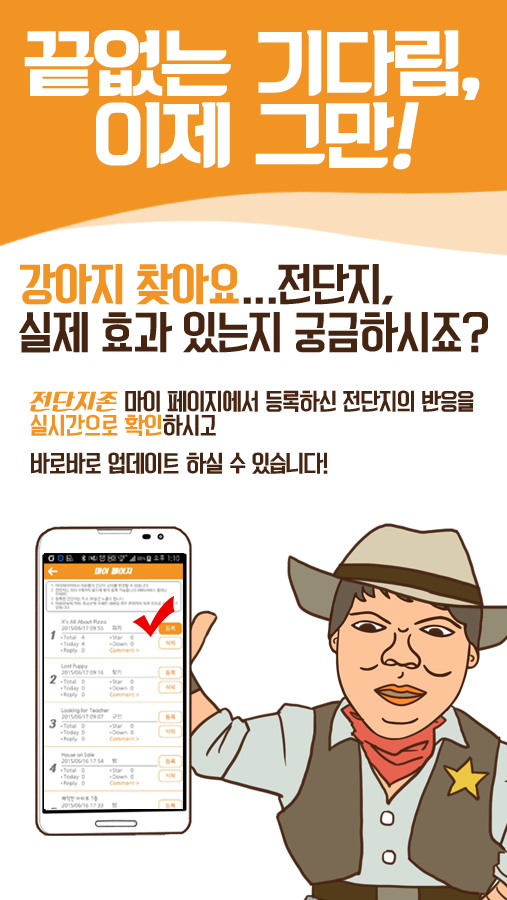
<style>
.page{position:relative;width:507px;height:900px;background:#ffffff}
.page>*{position:absolute;margin:0}
.t1{font:72px/72px "KoreanBLACK-B";letter-spacing:-0.05em;color:#ffffff}
.t2{font:72px/72px "KoreanBLACK-B";letter-spacing:-0.05em;color:#ffffff;font-style:italic}
.t3{font:42px/48px "KoreanYNMYT-M";letter-spacing:-0.05em;color:#462412}
.t4{font:42px/48px "KoreanYNMYT-B";letter-spacing:-0.05em;color:#f29423}
.t5{font:22px/24px "KoreanYNMYT-M";letter-spacing:-0.05em;color:#462412}
.t6{font:22px/24px "KoreanPDSR-R";color:#f29423}
.t7{font:22px/24px "KoreanYNMYT-M";letter-spacing:-0.05em;color:#f29423}
.t8{font:22px/14px "KoreanYNMYT-M";letter-spacing:-0.05em;color:#f29423}
.t9{font:22px/14px "KoreanYNMYT-M";letter-spacing:-0.05em;color:#462412}
</style>
<div class="page">
<p class="t1" style="left:24px;top:30px;width:456px;height:140px;text-align:center">끝없는 기다림,<br>이제 그만<span class="t2">!</span></p>
<p class="t3" style="left:19px;top:263px;width:469px;height:90px"><span class="t4">강아지 찾아요</span>...전단지,<br>실제 효과 있는지 궁금하시죠?</p>
<p class="t5" style="left:29px;top:390px;width:445px;height:84px"><span class="t6">전단지존</span> 마이 페이지에서 등록하신 전단지의 반응을<br><span class="t7">실시</span><span class="t8">간으로 확인</span><span class="t9">하시고 <br><br>바로바로 업</span>데이트 하실 수 있습니다!</p>
</div>
